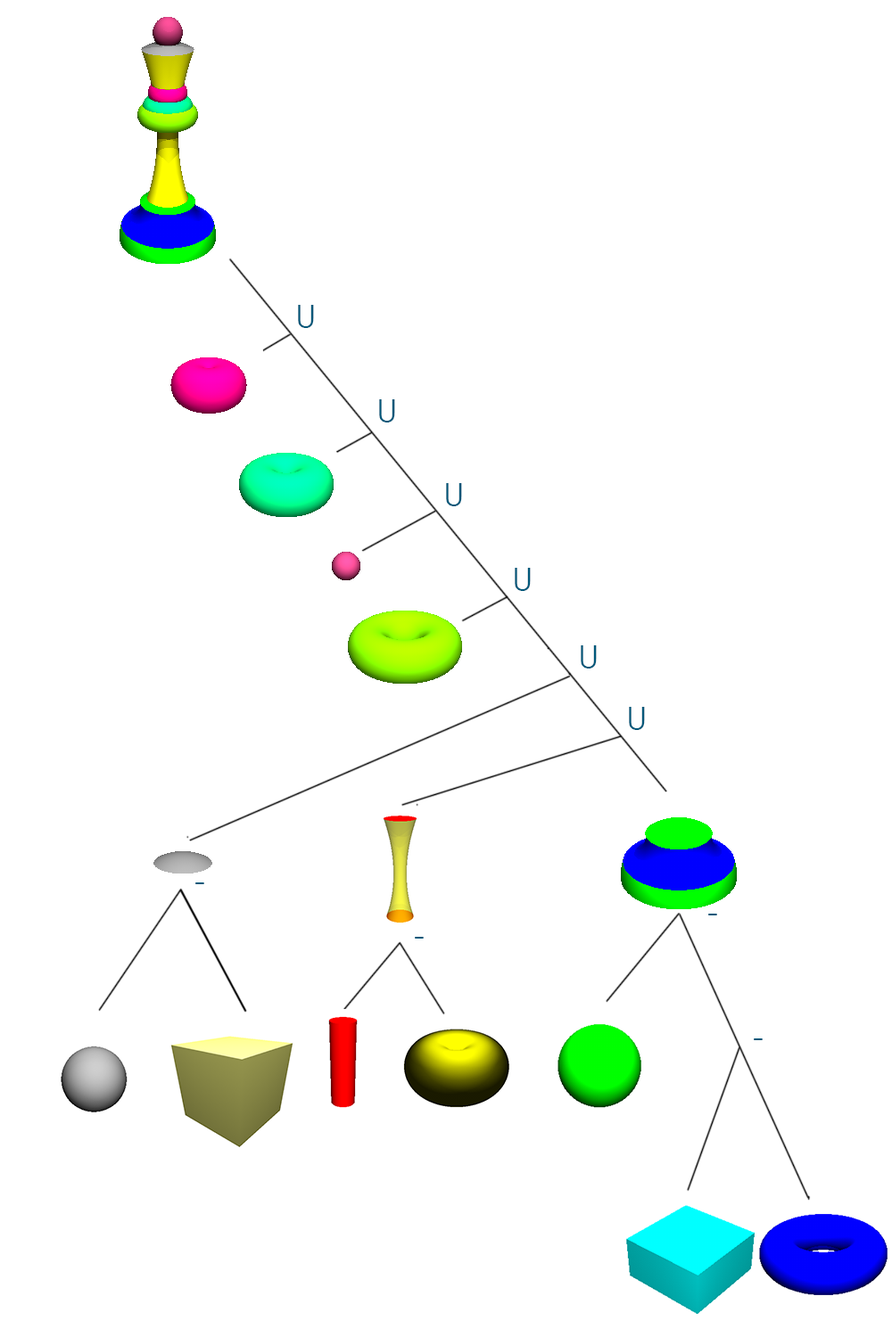
<style>
.page{position:relative;width:892px;height:1337px;background:#ffffff}
.page>*{position:absolute;margin:0}
.t1{font:32.1px "CenturyGothic";color:#00587a}
</style>
<div class="page">
<p class="t1" style="left:298px;top:305px;width:16px;height:23px">U</p>
<p class="t1" style="left:379px;top:399px;width:16px;height:24px">U</p>
<p class="t1" style="left:446px;top:483px;width:16px;height:23px">U</p>
<p class="t1" style="left:514px;top:568px;width:17px;height:23px">U</p>
<p class="t1" style="left:580px;top:646px;width:16px;height:23px">U</p>
<p class="t1" style="left:629px;top:707px;width:16px;height:23px">U</p>
<p class="t1" style="left:195px;top:883px;width:9px;height:1px">-</p>
<p class="t1" style="left:708px;top:914px;width:9px;height:2px">-</p>
<p class="t1" style="left:415px;top:937px;width:9px;height:2px">-</p>
<p class="t1" style="left:753px;top:1039px;width:9px;height:2px">-</p>
</div>
